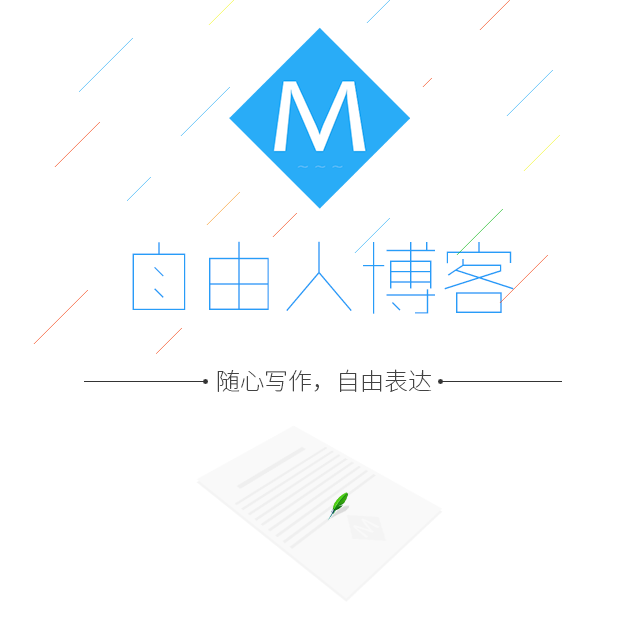
<style>
.page{position:relative;width:640px;height:640px;background:#ffffff}
.page>*{position:absolute;margin:0}
.t1{font:80px "RTWSShangGoG0v1-UltLight";color:#279df8}
.t2{font:24px "SourceHanSansCN-ExtraLight";color:#424242}
</style>
<div class="page">
<p class="t1" style="left:132px;top:241px;width:382px;height:73px">自由人博客</p>
<p class="t2" style="left:217px;top:369px;width:215px;height:23px">随心写作，自由表达</p>
</div>
